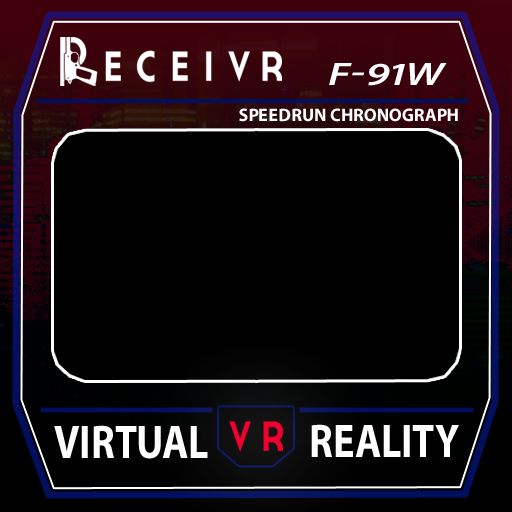
<style>
.page{position:relative;width:512px;height:512px;background:#000000}
.page>*{position:absolute;margin:0}
.t1{font:32.5px "MyriadPro-SemiboldIt";color:#ffffff;text-transform:uppercase;scale:1.4 1}
.t2{font:18px "MyriadPro-Bold";color:#ffffff;text-transform:uppercase}
.t3{font:47.4px "MyriadPro-Bold";color:#ffffff;text-transform:uppercase;scale:0.85 1}
</style>
<div class="page">
<p class="t1" style="left:329px;top:63px;width:118px;height:23px">f-91w</p>
<p class="t2" style="left:239px;top:108px;width:219px;height:14px">Speedrun chronograph</p>
<p class="t3" style="left:54px;top:425px;width:154px;height:34px">virtual</p>
<p class="t3" style="left:311px;top:424px;width:148px;height:33px">reality</p>
</div>
